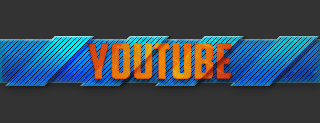
<style>
.page{position:relative;width:320px;height:123px;background:#333333}
.page>*{position:absolute;margin:0}
.t1{font:50px "AmericanCaptain"}
</style>
<div class="page">
<p class="t1" style="left:87px;top:43px;width:145px;height:36px">YOUTUBE</p>
</div>
